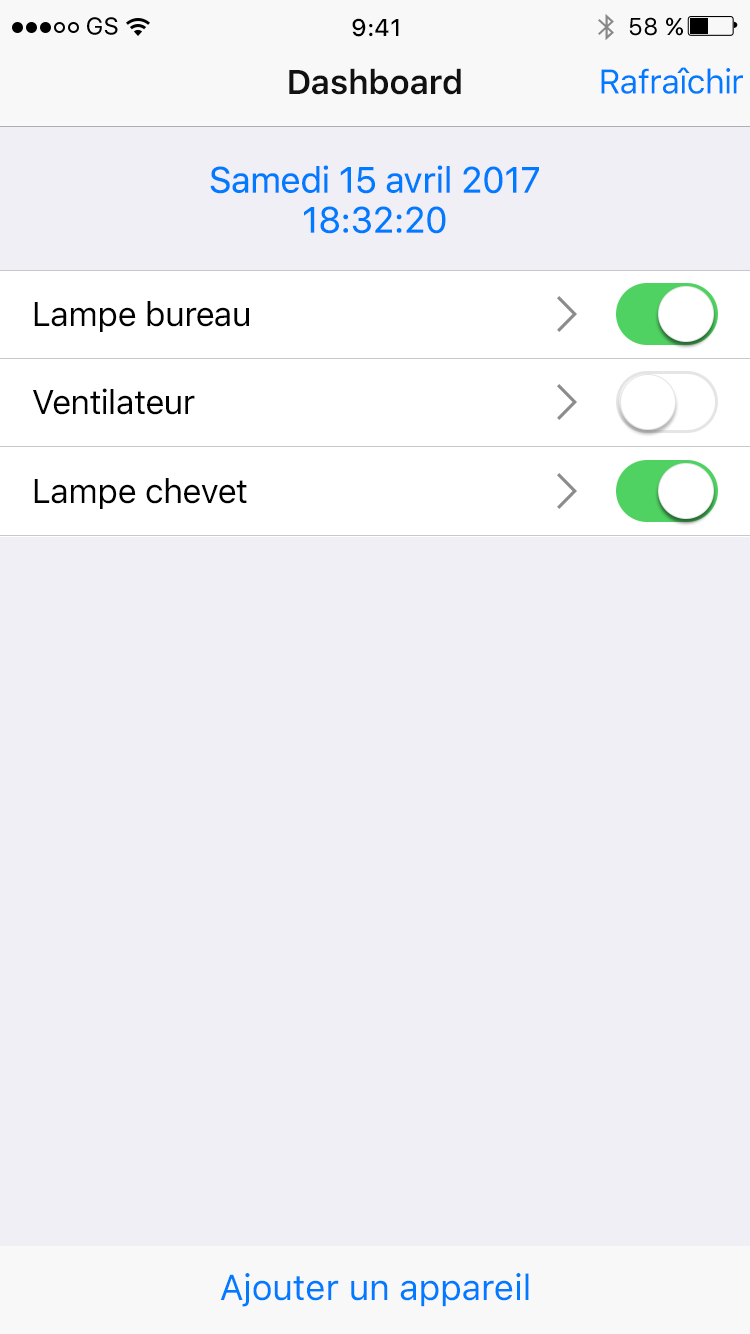
<style>
.page{position:relative;width:750px;height:1334px;background:#f0eff5}
.page>*{position:absolute;margin:0}
.t1{font:24px "SFUIText-Regular";color:#000000}
.t2{font:24px "SFUIText-Medium";color:#000000}
.t3{font:34px "SFUIText-Semibold";letter-spacing:-0.024em;color:#111111}
.t4{font:34px "SFUIText-Regular";letter-spacing:-0.024em;color:#007aff}
.t5{font:36px/40px "SFUIText-Regular";letter-spacing:-0.024em;color:#007aff}
.t6{font:34px "SFUIText-Regular";letter-spacing:-0.024em;color:#000000}
.t7{font:36px "SFUIText-Regular";letter-spacing:-0.014em;color:#007aff}
</style>
<div class="page">
<p class="t1" style="left:87px;top:17px;width:31px;height:18px">GS</p>
<p class="t1" style="left:629px;top:17px;width:54px;height:19px">58 %</p>
<p class="t2" style="left:352px;top:18px;width:47px;height:19px">9:41</p>
<p class="t3" style="left:289px;top:68px;width:172px;height:27px">Dashboard</p>
<p class="t4" style="left:601px;top:67px;width:142px;height:27px">Rafraîchir</p>
<p class="t5" style="left:210px;top:165px;width:329px;height:69px;text-align:center">Samedi 15 avril 2017<br>18:32:20</p>
<p class="t6" style="left:34px;top:301px;width:215px;height:31px">Lampe bureau</p>
<p class="t6" style="left:33px;top:388px;width:162px;height:27px">Ventilateur</p>
<p class="t6" style="left:34px;top:478px;width:213px;height:31px">Lampe chevet</p>
<p class="t7" style="left:220px;top:1273px;width:309px;height:34px">Ajouter un appareil</p>
</div>
